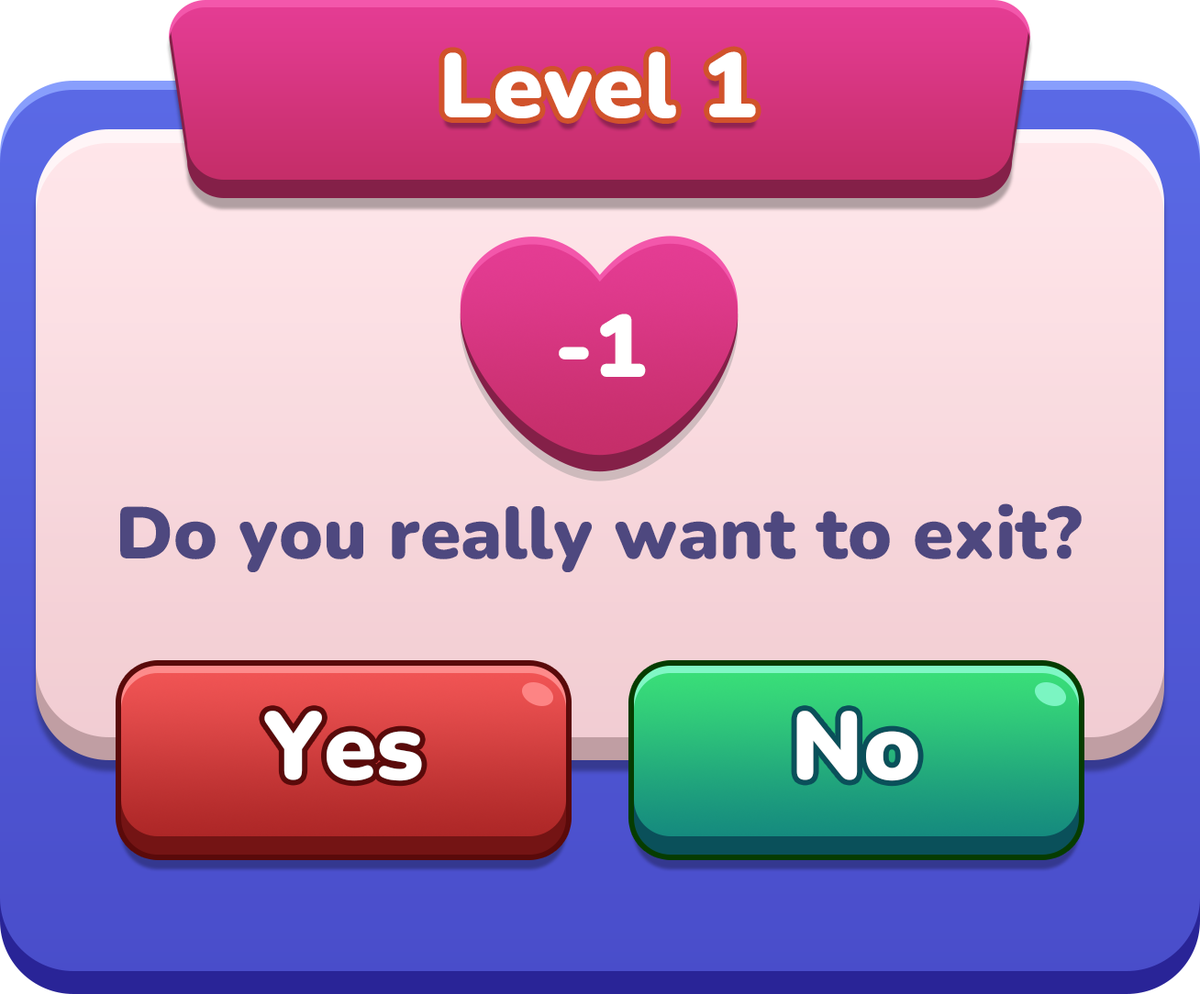
<style>
.page{position:relative;width:1200px;height:994px}
.page>*{position:absolute;margin:0}
.t1{font:91.7px "Nunito-Black";color:#ffffff}
.t2{font:88px "Nunito-Black";color:#ffffff}
.t3{font:73.4px "Nunito-Black";color:#4e487f}
.t4{font:95.4px "Nunito-Black";color:#ffffff}
</style>
<div class="page">
<p class="t1" style="left:444px;top:51px;width:312px;height:67px">Level 1</p>
<p class="t2" style="left:558px;top:314px;width:88px;height:63px">-1</p>
<p class="t3" style="left:120px;top:503px;width:961px;height:69px">Do you really want to exit?</p>
<p class="t4" style="left:264px;top:711px;width:158px;height:70px">Yes</p>
<p class="t4" style="left:796px;top:711px;width:122px;height:70px">No</p>
</div>
